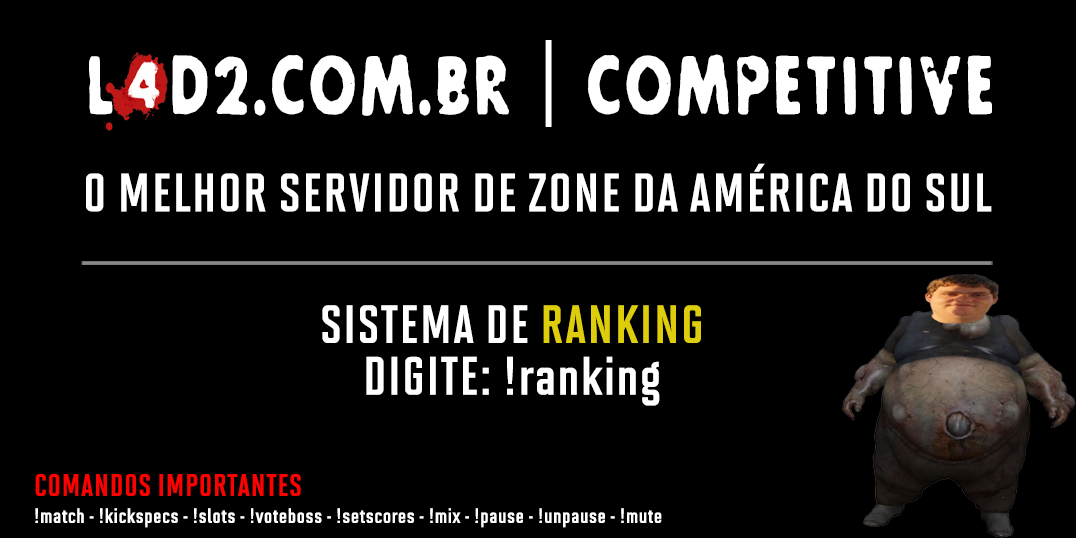
<style>
.page{position:relative;width:1076px;height:538px;background:#000000}
.page>*{position:absolute;margin:0}
.t1{font:81.6px "Future-Rot";letter-spacing:0.029em;color:#ffffff;scale:0.7 1}
.t2{font:81.6px "SolanoGothicMVB-Bd";letter-spacing:0.029em;color:#ffffff;scale:0.7 1}
.t3{font:53.7px "SolanoGothicMVB-Bd";letter-spacing:0.029em;color:#ffffff}
.t4{font:53.8px "SolanoGothicMVB-Bd";letter-spacing:0.029em;color:#ffffff}
.t5{font:53.8px "SolanoGothicMVB-Bd";letter-spacing:0.029em;color:#decd0d}
.t6{font:31.2px "SolanoGothicMVB-Bd";letter-spacing:0.029em;color:#fe0000}
.t7{font:20.8px "SolanoGothicMVB-Bd";letter-spacing:0.029em;color:#ffffff}
</style>
<div class="page">
<p class="t1" style="left:89px;top:40px;width:903px;height:87px">L  D2.COM.BR <span class="t2">|</span> COMPETITIVE</p>
<p class="t3" style="left:86px;top:163px;width:906px;height:49px">O MELHOR SERVIDOR DE ZONE DA AMÉRICA DO SUL</p>
<p class="t4" style="left:322px;top:305px;width:379px;height:101px;text-align:center">SISTEMA DE <span class="t5">RANKING<br></span>DIGITE: !ranking</p>
<p class="t6" style="left:35px;top:474px;width:266px;height:22px">COMANDOS IMPORTANTES</p>
<p class="t7" style="left:35px;top:508px;width:627px;height:20px">!match - !kickspecs - !slots - !voteboss - !setscores - !mix - !pause - !unpause - !mute</p>
</div>
